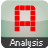
<style>
.page{position:relative;width:48px;height:48px}
.page>*{position:absolute;margin:0}
.t1{font:48px "Astronaut";color:#f30000}
.t2{font:9px "Small Fonts";color:#f3f3f3}
</style>
<div class="page">
<p class="t1" style="left:14px;top:5px;width:22px;height:27px">A</p>
<p class="t2" style="left:9px;top:39px;width:34px;height:9px">Analysis</p>
</div>
